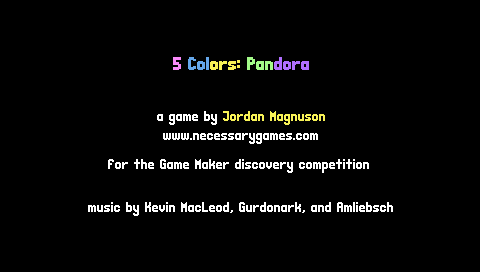
<style>
.page{position:relative;width:480px;height:272px;background:#000000}
.page>*{position:absolute;margin:0}
.t1{font:10px "CasualEncounter";color:#f8f256}
.t2{font:10px "CasualEncounter";color:#f989fa}
.t3{font:10px "CasualEncounter";color:#65a7eb}
.t4{font:10px "CasualEncounter";color:#a3fa89}
.t5{font:10px "CasualEncounter";color:#b06fff}
.t6{font:8px "CasualEncounter";color:#ffffff}
.t7{font:8px "CasualEncounter";color:#f8f256}
.t8{font:8px/14px "CasualEncounter";color:#ffffff}
</style>
<div class="page">
<p class="t1" style="left:173px;top:57px;width:136px;height:13px"><span class="t2">5</span><span class="t3"> Col</span>ors: <span class="t4">Pan</span><span class="t5">dora</span></p>
<p class="t6" style="left:88px;top:111px;width:305px;height:105px;text-align:center">a game by <span class="t7">Jordan Magnuson<br></span><br>www.necessarygames.com<br><br><br>for the Game Maker discovery competition <br><br><br><br><span class="t8">music by Kevin MacLeod, Gurdonark, and Amliebsch</span></p>
</div>
